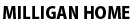
<style>
.page{position:relative;width:135px;height:25px;background:#ffffff}
.page>*{position:absolute;margin:0}
.t1{font:16.7px "KozGoPro-Heavy";color:#000000}
</style>
<div class="page">
<p class="t1" style="left:3px;top:6px;width:127px;height:13px">MILLIGAN HOME</p>
</div>
